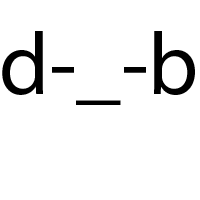
<style>
.page{position:relative;width:200px;height:200px;background:#ffffff}
.page>*{position:absolute;margin:0}
.t1{font:89px "MyriadPro-Regular";color:#000000}
</style>
<div class="page">
<p class="t1" style="left:2px;top:31px;width:193px;height:74px">d-_-b</p>
</div>
